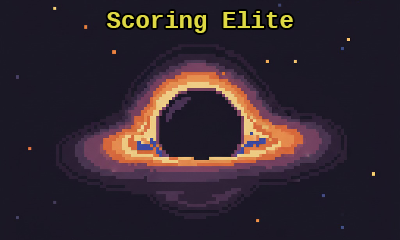
<style>
.page{position:relative;width:400px;height:240px;background:#1a1825}
.page>*{position:absolute;margin:0}
.t1{font:24px "LiterationMonoPowerline-Bold";color:#ded944}
</style>
<div class="page">
<p class="t1" style="left:107px;top:11px;width:186px;height:22px">Scoring Elite</p>
</div>
